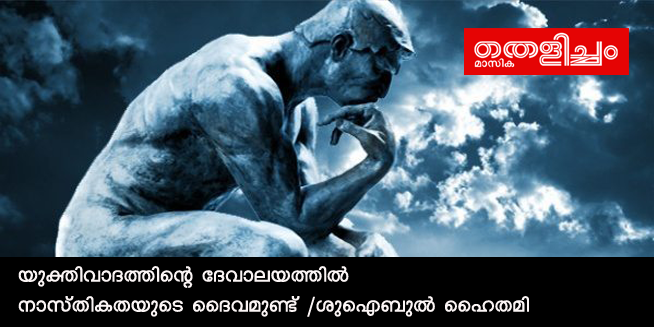
<style>
.page{position:relative;width:654px;height:327px}
.page>*{position:absolute;margin:0}
.t1{font:25px "ML-KV-Sakkeena-Medium";color:#fbf5f5}
</style>
<div class="page">
<p class="t1" style="left:18px;top:266px;width:511px;height:51px">bpàn-hm-Z-¯n-sâ tZ-hm-e-b-¯nÂ <br>\m-kv-Xn-I-X-bp-sS ssZ-h-ap-­v /ip-sF-_pÂ sslXan</p>
</div>
